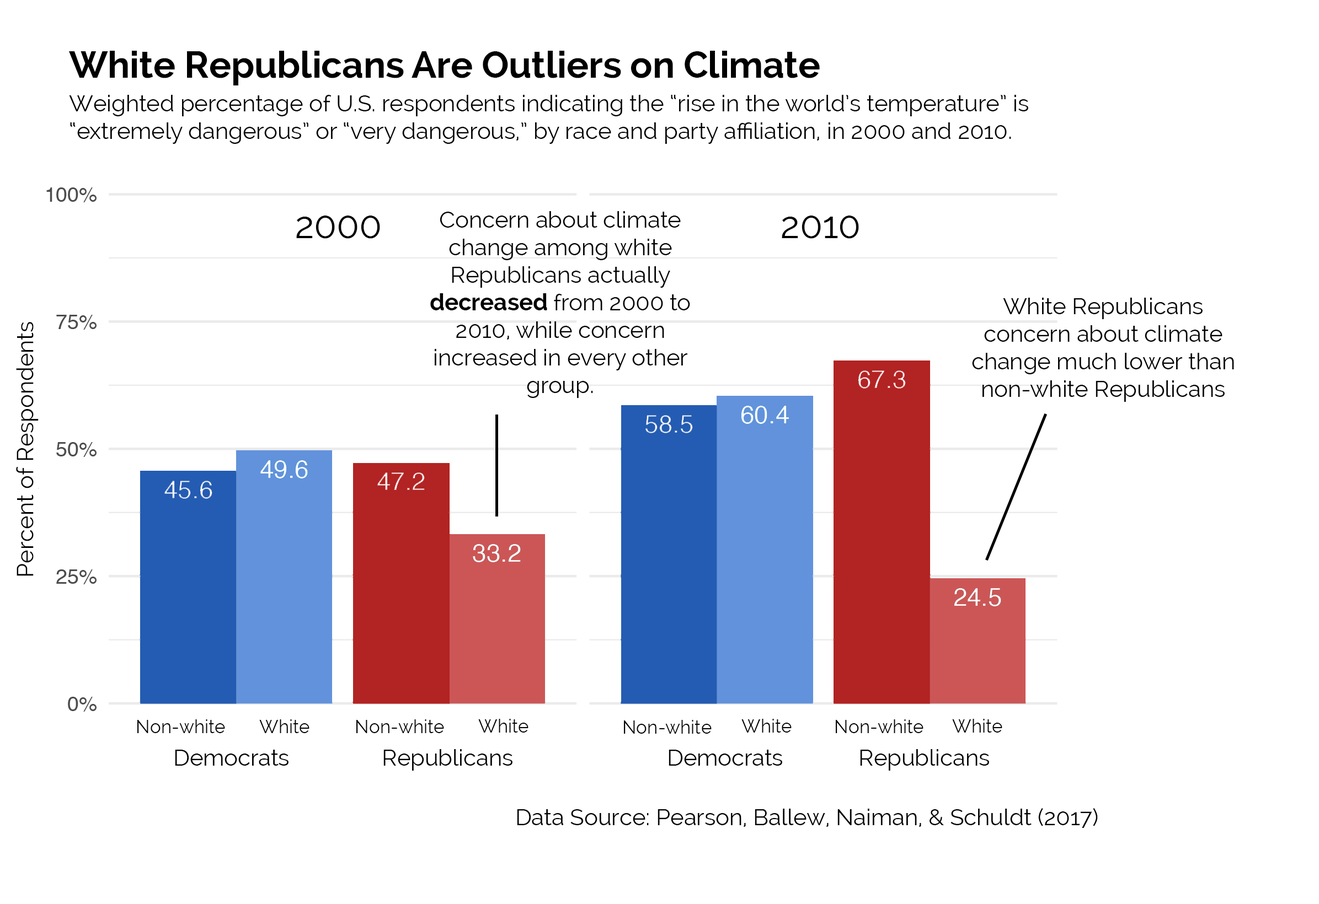
<style>
.page{position:relative;width:1319px;height:904px;background:#ffffff}
.page>*{position:absolute;margin:0}
.t1{font:36.8px "Raleway-Bold";color:#000000}
.t2{font:23px "Raleway";color:#000000}
.t3{font:36.8px "Raleway";color:#000000}
.t4{font:23px "Raleway-Bold";color:#000000}
.t5{font:18.4px "Raleway";color:#000000}
</style>
<div class="page">
<p class="t1" style="left:68px;top:51px;width:751px;height:34px">White Republicans Are Outliers on Climate</p>
<p class="t2" style="left:69px;top:95px;width:959px;height:49px">Weighted percentage of U.S. respondents indicating the “rise in the world’s temperature” is “extremely dangerous” or “very dangerous,” by race and party affiliation, in 2000 and 2010.</p>
<p class="t3" style="left:296px;top:216px;width:84px;height:23px">2000</p>
<p class="t2" style="left:430px;top:211px;width:260px;height:187px;text-align:center">Concern about climate change among white Republicans actually <span class="t4">decreased </span>from 2000 to 2010, while concern increased in every other group.</p>
<p class="t3" style="left:781px;top:216px;width:78px;height:23px">2010</p>
<p class="t2" style="left:972px;top:298px;width:262px;height:104px;text-align:center">White Republicans concern about climate change much lower than non-white Republicans</p>
<p class="t2" style="left:16px;top:322px;width:23px;height:254px;rotate:-90deg">Percent of Respondents</p>
<p class="t5" style="left:137px;top:720px;width:88px;height:13px">Non-white</p>
<p class="t5" style="left:259px;top:720px;width:50px;height:13px">White</p>
<p class="t5" style="left:356px;top:720px;width:88px;height:13px">Non-white</p>
<p class="t5" style="left:478px;top:719px;width:50px;height:14px">White</p>
<p class="t5" style="left:624px;top:720px;width:87px;height:14px">Non-white</p>
<p class="t5" style="left:741px;top:719px;width:50px;height:14px">White</p>
<p class="t5" style="left:835px;top:720px;width:88px;height:13px">Non-white</p>
<p class="t5" style="left:952px;top:719px;width:50px;height:14px">White</p>
<p class="t2" style="left:175px;top:750px;width:113px;height:16px">Democrats</p>
<p class="t2" style="left:383px;top:749px;width:129px;height:22px">Republicans</p>
<p class="t2" style="left:668px;top:750px;width:114px;height:16px">Democrats</p>
<p class="t2" style="left:860px;top:749px;width:129px;height:22px">Republicans</p>
<p class="t2" style="left:517px;top:808px;width:580px;height:20px">Data Source: Pearson, Ballew, Naiman, &amp; Schuldt (2017)</p>
</div>
